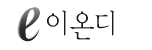
<style>
.page{position:relative;width:152px;height:50px;background:#ffffff}
.page>*{position:absolute;margin:0}
.t1{font:30px "YDIYMjO220";color:#1b1b1b;scale:0.9 1}
</style>
<div class="page">
<p class="t1" style="left:47px;top:10px;width:19px;height:26px">이</p>
<p class="t1" style="left:70px;top:11px;width:24px;height:29px">온</p>
<p class="t1" style="left:95px;top:10px;width:19px;height:26px">디</p>
</div>
